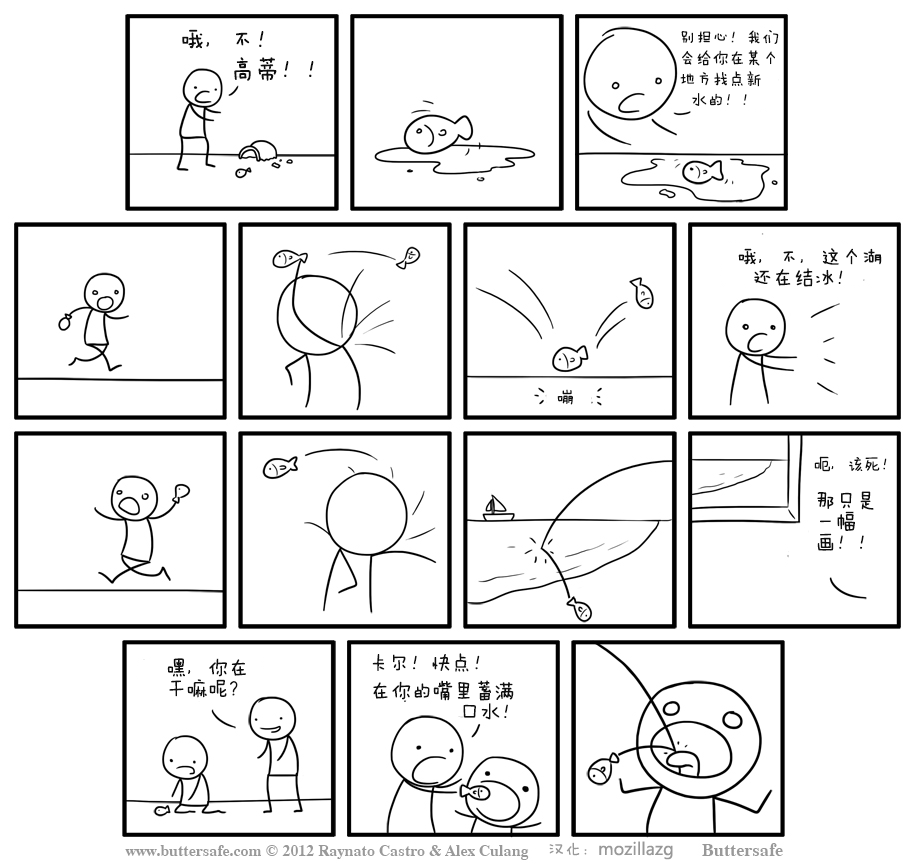
<style>
.page{position:relative;width:915px;height:867px;background:#ffffff}
.page>*{position:absolute;margin:0}
.t1{font:25px "FZMWJW--GB1-0";color:#0e0e0e}
.t2{font:16.7px/20.8px "FZMWJW--GB1-0";color:#0e0e0e}
.t3{font:20.8px/20.8px "FZMWJW--GB1-0";color:#0e0e0e}
.t4{font:16.7px "FZMWJW--GB1-0";color:#0e0e0e}
.t5{font:20.8px "FZMWJW--GB1-0";color:#0e0e0e}
.t6{font:16.7px "MicrosoftYaHeiUI";color:#989898}
.t7{font:16.7px "FZMWJW--GB1-0";color:#989898}
</style>
<div class="page">
<p class="t1" style="left:182px;top:29px;width:82px;height:20px">哦，不！</p>
<p class="t2" style="left:680px;top:30px;width:99px;height:76px">别担心！我们<br>会给你在某个<br>地方找点新<br>  水的！！</p>
<p class="t1" style="left:234px;top:57px;width:80px;height:24px">高蒂！！</p>
<p class="t3" style="left:738px;top:248px;width:144px;height:39px">哦，不，这个湖<br>  还在结冰！</p>
<p class="t4" style="left:557px;top:389px;width:16px;height:16px">嘣</p>
<p class="t4" style="left:814px;top:456px;width:73px;height:16px">呃，该死！</p>
<p class="t3" style="left:817px;top:491px;width:57px;height:60px">那只是<br>一幅<br>画！！</p>
<p class="t5" style="left:372px;top:653px;width:108px;height:19px">卡尔！快点！</p>
<p class="t3" style="left:167px;top:658px;width:79px;height:40px">嘿，你在<br>干嘛呢？</p>
<p class="t3" style="left:373px;top:680px;width:141px;height:40px">在你的嘴里蓄满<br>            口水！</p>
<p class="t6" style="left:549px;top:841px;width:124px;height:19px"><span class="t7">汉化：</span>mozillazg</p>
</div>
